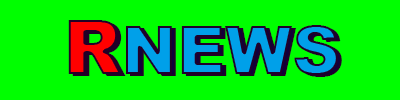
<style>
.page{position:relative;width:400px;height:100px;background:#00ff00}
.page>*{position:absolute;margin:0}
.t1{font:66.7px "Arial-Black";color:#00a0e9}
.t2{font:75px "Arial-Black";color:#ff0000}
.t3{font:66.7px "Arial-Black"}
.t4{font:75px "Arial-Black"}
</style>
<div class="page">
<p class="t1" style="left:68px;top:20px;width:270px;height:55px"><span class="t2">R</span>NEWS</p>
<p class="t3" style="left:72px;top:22px;width:270px;height:55px"><span class="t4">R</span>NEWS</p>
</div>
